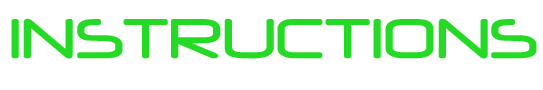
<style>
.page{position:relative;width:543px;height:90px;background:#ffffff}
.page>*{position:absolute;margin:0}
.t1{font:66px "Neuropol";color:#25da25}
</style>
<div class="page">
<p class="t1" style="left:11px;top:18px;width:526px;height:41px">INSTRUCTIONS</p>
</div>
